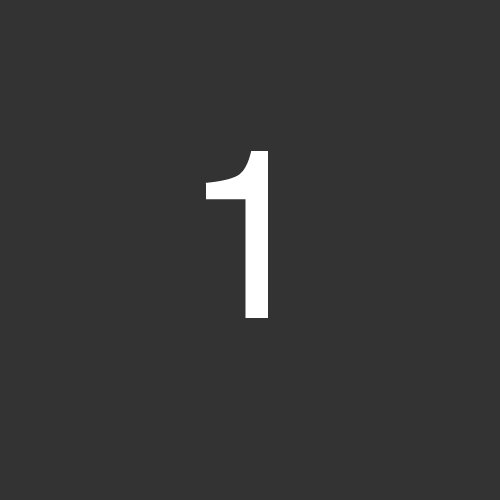
<style>
.page{position:relative;width:500px;height:500px;background:#333333}
.page>*{position:absolute;margin:0}
.t1{font:240px "Helvetica";letter-spacing:0.36em;color:#ffffff}
</style>
<div class="page">
<p class="t1" style="left:205px;top:151px;width:63px;height:167px">1</p>
</div>
